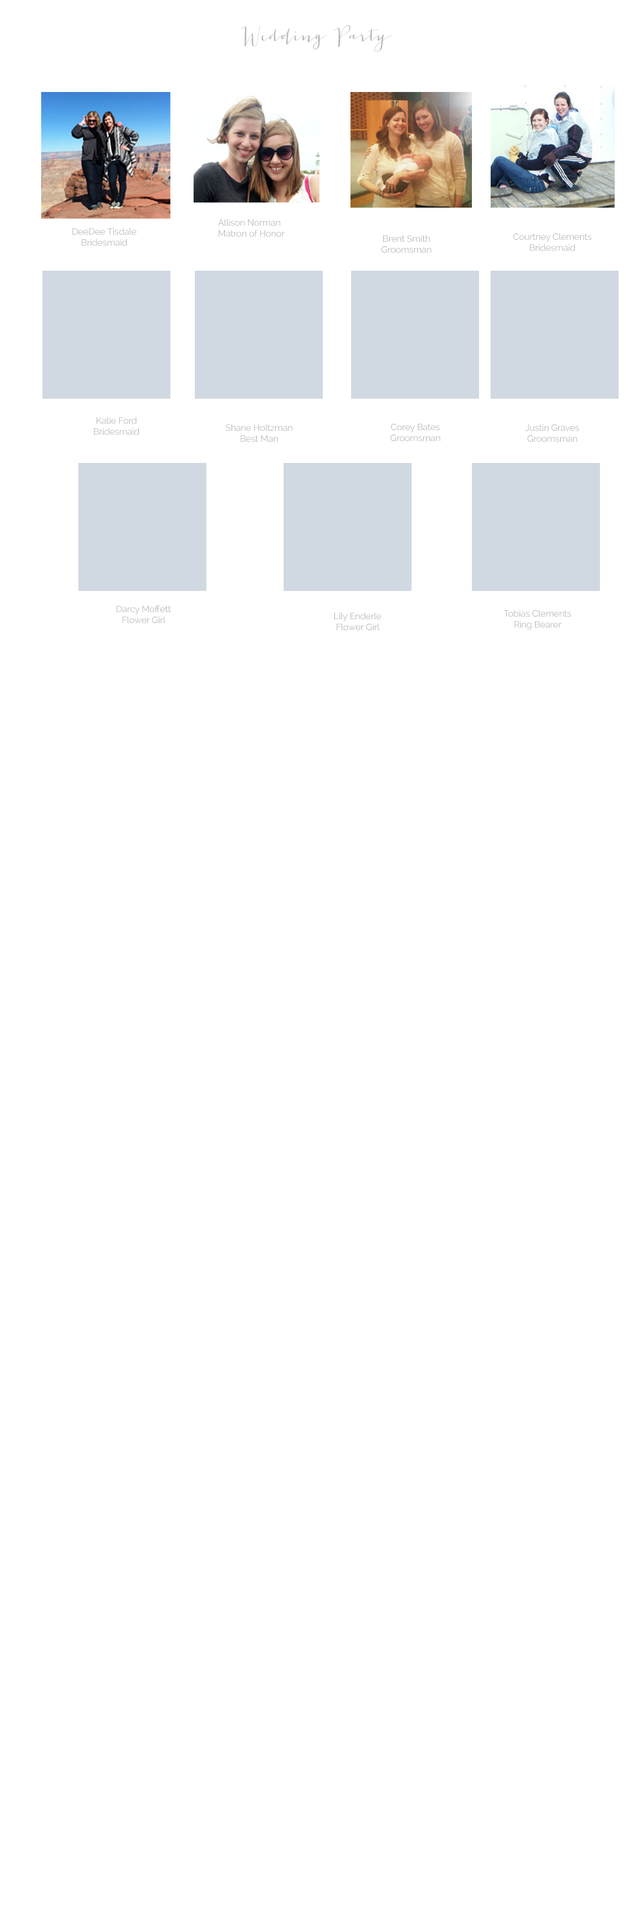
<style>
.page{position:relative;width:643px;height:1929px;background:#ffffff}
.page>*{position:absolute;margin:0}
.t1{font:19.3px "JacquesGilles";letter-spacing:-0.01em;color:#bab7b7}
.t2{font:9px "Raleway-Regular";letter-spacing:-0.01em;color:#bab7b7}
</style>
<div class="page">
<p class="t1" style="left:241px;top:25px;width:151px;height:26px">Wedding Party</p>
<p class="t2" style="left:218px;top:219px;width:67px;height:18px">Allison Norman<br>Matron of Honor</p>
<p class="t2" style="left:72px;top:228px;width:64px;height:18px;text-align:center">DeeDee Tisdale<br>Bridesmaid</p>
<p class="t2" style="left:513px;top:233px;width:78px;height:18px;text-align:center">Courtney Clements<br>Bridesmaid</p>
<p class="t2" style="left:381px;top:235px;width:50px;height:18px;text-align:center">Brent Smith<br>Groomsman</p>
<p class="t2" style="left:94px;top:417px;width:46px;height:18px;text-align:center">Katie Ford<br>Bridesmaid</p>
<p class="t2" style="left:226px;top:424px;width:66px;height:18px;text-align:center">Shane Holtzman<br>Best Man</p>
<p class="t2" style="left:390px;top:424px;width:50px;height:18px;text-align:center">Corey Bates<br>Groomsman</p>
<p class="t2" style="left:525px;top:424px;width:54px;height:18px;text-align:center">Justin Graves<br>Groomsman</p>
<p class="t2" style="left:116px;top:605px;width:55px;height:19px;text-align:center">Darcy Moffett<br>Flower Girl</p>
<p class="t2" style="left:334px;top:612px;width:47px;height:19px;text-align:center">Lily Enderle<br>Flower Girl</p>
<p class="t2" style="left:503px;top:609px;width:68px;height:21px;text-align:center">Tobias Clements<br>Ring Bearer</p>
</div>
